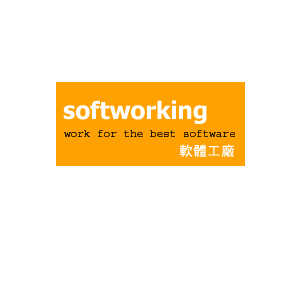
<style>
.page{position:relative;width:300px;height:300px;background:#ffffff}
.page>*{position:absolute;margin:0}
.t1{font:24px "Tahoma-Bold";color:#fdfdfc}
.t2{font:11px "Courier";color:#020202}
.t3{font:14px "¥þ¯u¤¤¶ÂÅé";color:#fdfdfd}
</style>
<div class="page">
<p class="t1" style="left:63px;top:100px;width:144px;height:24px">softworking</p>
<p class="t2" style="left:64px;top:130px;width:171px;height:7px">work for the best software</p>
<p class="t3" style="left:179px;top:144px;width:56px;height:13px">軟體工廠</p>
</div>
